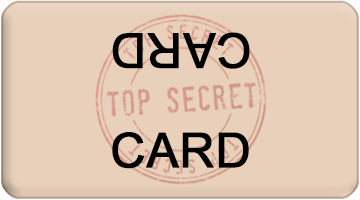
<style>
.page{position:relative;width:360px;height:200px;background:#e8d0bb}
.page>*{position:absolute;margin:0}
.t1{font:48px "ArialMT";color:#000000;font-weight:bold}
</style>
<div class="page">
<p class="t1" style="left:112px;top:32px;width:138px;height:37px;rotate:180deg">CARD</p>
<p class="t1" style="left:112px;top:132px;width:137px;height:37px">CARD</p>
</div>
